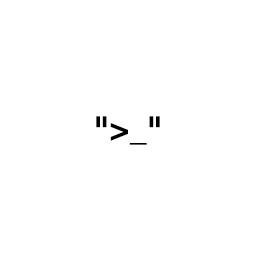
<style>
.page{position:relative;width:256px;height:256px;background:#ffffff}
.page>*{position:absolute;margin:0}
.t1{font:34px "HelveticaNeue-Bold";color:#000000}
</style>
<div class="page">
<p class="t1" style="left:96px;top:116px;width:64px;height:29px">"&gt;_"</p>
</div>
